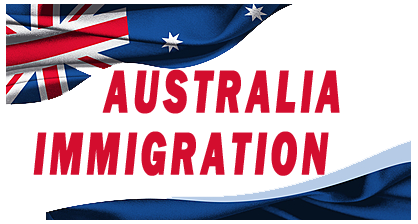
<style>
.page{position:relative;width:418px;height:224px;background:#ffffff}
.page>*{position:absolute;margin:0}
.t1{font:62.4px/62.4px "FranklinGothic-HeavyItalic";letter-spacing:0.1em;color:#d30d2e;text-transform:uppercase;font-weight:bold;scale:0.61 1}
</style>
<div class="page">
<p class="t1" style="left:33px;top:69px;width:307px;height:107px">AUSTRALIA<br>IMMIGRATION</p>
</div>
